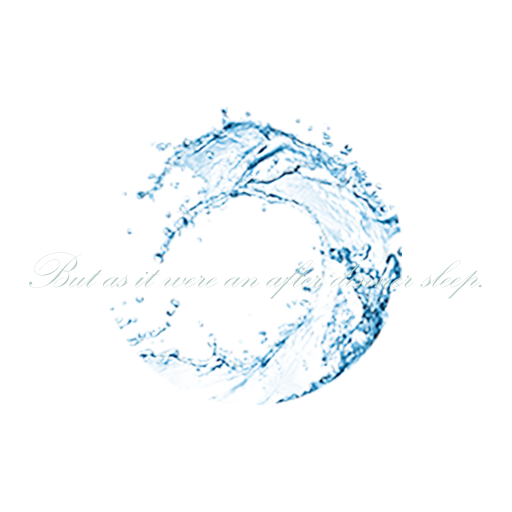
<style>
.page{position:relative;width:512px;height:512px;background:#ffffff}
.page>*{position:absolute;margin:0}
.t1{font:50px "KunstlerScript";color:#b6cdc5}
</style>
<div class="page">
<p class="t1" style="left:29px;top:252px;width:453px;height:47px">But as it were an after dinner sleep.</p>
</div>
